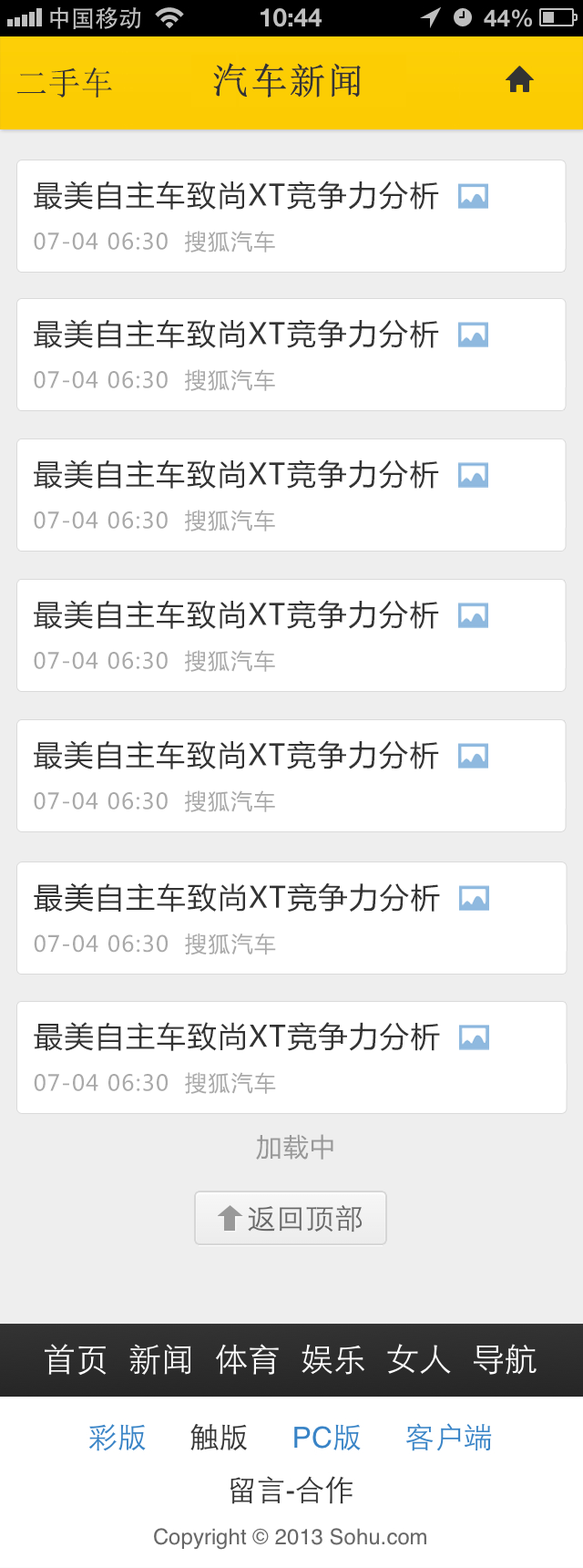
<style>
.page{position:relative;width:583px;height:1568px;background:#ffffff}
.page>*{position:absolute;margin:0}
.t1{font:36.5px "SimSun";letter-spacing:0.025em;color:#333333;font-weight:bold}
.t2{font:32.8px "SimSun";color:#333333}
.t3{font:21.9px/43.8px "MicrosoftYaHei";letter-spacing:0.05em;color:#a9a9a9}
.t4{font:29.2px "MicrosoftYaHei";letter-spacing:0.05em;color:#333333}
.t5{font:22px/43.9px "MicrosoftYaHei";letter-spacing:0.05em;color:#a9a9a9}
.t6{font:29.3px "MicrosoftYaHei";letter-spacing:0.05em;color:#333333}
.t7{font:25.5px "MicrosoftYaHei";letter-spacing:0.05em;color:#989898}
</style>
<div class="page">
<p class="t1" style="left:213px;top:63px;width:148px;height:35px">汽车新闻</p>
<p class="t2" style="left:16px;top:67px;width:96px;height:31px">二手车</p>
<p class="t3" style="left:34px;top:181px;width:405px;height:72px"><span class="t4">最美自主车致尚XT竞争力分析<br></span>07-04 06:30  搜狐汽车</p>
<p class="t3" style="left:34px;top:319px;width:405px;height:72px"><span class="t4">最美自主车致尚XT竞争力分析<br></span>07-04 06:30  搜狐汽车</p>
<p class="t3" style="left:34px;top:459px;width:405px;height:72px"><span class="t4">最美自主车致尚XT竞争力分析<br></span>07-04 06:30  搜狐汽车</p>
<p class="t3" style="left:34px;top:600px;width:405px;height:72px"><span class="t4">最美自主车致尚XT竞争力分析<br></span>07-04 06:30  搜狐汽车</p>
<p class="t3" style="left:34px;top:740px;width:405px;height:72px"><span class="t4">最美自主车致尚XT竞争力分析<br></span>07-04 06:30  搜狐汽车</p>
<p class="t5" style="left:34px;top:882px;width:406px;height:73px"><span class="t6">最美自主车致尚XT竞争力分析<br></span>07-04 06:30  搜狐汽车</p>
<p class="t5" style="left:34px;top:1022px;width:406px;height:72px"><span class="t6">最美自主车致尚XT竞争力分析<br></span>07-04 06:30  搜狐汽车</p>
<p class="t7" style="left:256px;top:1134px;width:78px;height:26px">加载中</p>
</div>
